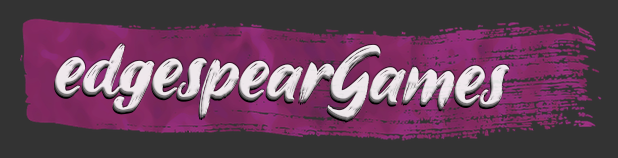
<style>
.page{position:relative;width:618px;height:158px;background:#333333}
.page>*{position:absolute;margin:0}
.t1{font:77px "JamesStroker";color:#eee8eb}
</style>
<div class="page">
<p class="t1" style="left:55px;top:43px;width:455px;height:77px">edgespearGames</p>
</div>
